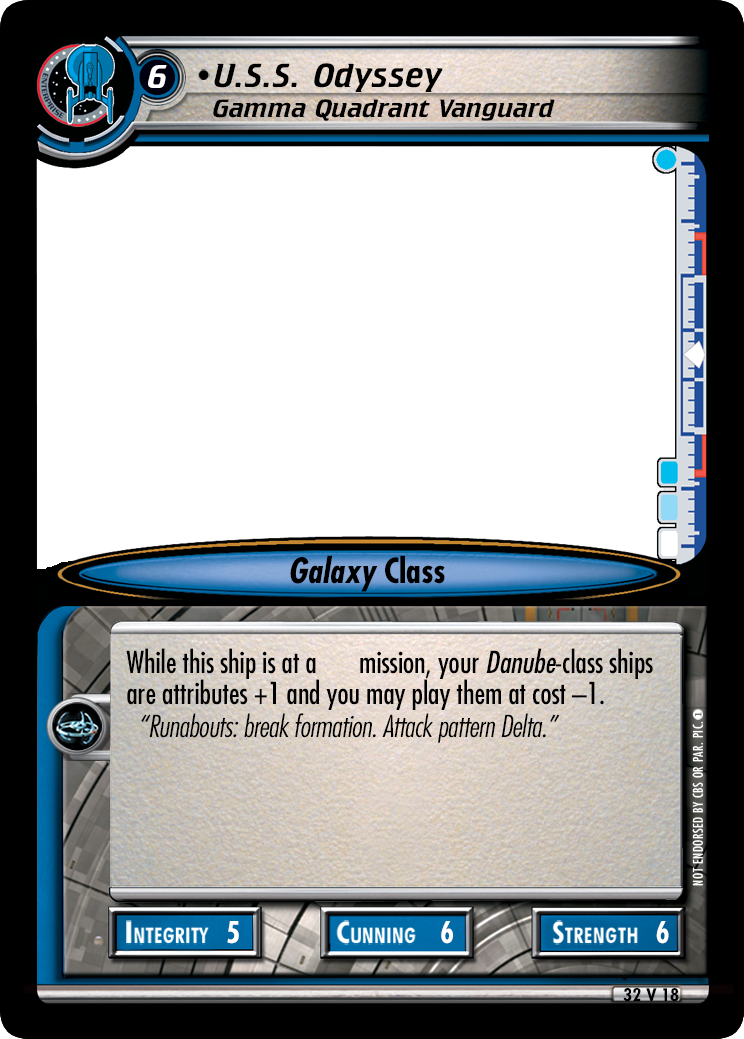
<style>
.page{position:relative;width:744px;height:1039px;background:#ffffff}
.page>*{position:absolute;margin:0}
.t1{font:33.2px "CrilleeBT-Italic";color:#ffffff}
.t2{font:33.7px "CrilleeBT-Italic";letter-spacing:0.03em;color:#000000}
.t3{font:25.3px "CrilleeBT-Italic";letter-spacing:0.003em;color:#000000;scale:1.08 1}
.t4{font:33.7px "FuturaLT-CondensedBoldOblique";letter-spacing:0.003em;color:#000000}
.t5{font:33.7px "FuturaLT-CondensedBold";color:#000000}
.t6{font:29.5px/31.6px "FuturaLT-Condensed";color:#000000}
.t7{font:29.5px/31.6px "FuturaLT-Condensed";color:#000000;font-style:italic}
.t8{font:29.5px "FuturaLT-CondensedLightObl";letter-spacing:-0.015em;color:#000000}
.t9{font:29px "FuturaLT-CondensedBold";color:#ffffff;text-transform:uppercase}
.t10{font:16.8px "FuturaLT-CondensedBold";color:#000000;scale:1.11 1}
</style>
<div class="page">
<p class="t1" style="left:148px;top:65px;width:19px;height:23px">6</p>
<p class="t2" style="left:214px;top:63px;width:229px;height:29px">U.S.S. Odyssey</p>
<p class="t3" style="left:213px;top:99px;width:342px;height:22px">Gamma Quadrant Vanguard</p>
<p class="t4" style="left:290px;top:555px;width:155px;height:37px">Galaxy<span class="t5"> Class</span></p>
<p class="t6" style="left:126px;top:648px;width:527px;height:62px">While this ship is at a       mission, your <span class="t7">Danube</span>-class ships are attributes +1 and you may play them at cost –1.</p>
<p class="t8" style="left:141px;top:713px;width:419px;height:30px">“Runabouts: break formation. Attack pattern Delta.”</p>
<p class="t9" style="left:227px;top:921px;width:12px;height:23px">5</p>
<p class="t9" style="left:441px;top:921px;width:12px;height:23px">6</p>
<p class="t9" style="left:656px;top:921px;width:13px;height:23px">6</p>
<p class="t10" style="left:623px;top:988px;width:56px;height:14px">32 V 18</p>
</div>
